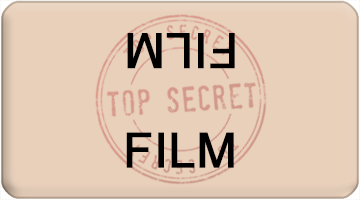
<style>
.page{position:relative;width:360px;height:200px;background:#e8d0bb}
.page>*{position:absolute;margin:0}
.t1{font:48px "ArialMT";color:#000000;font-weight:bold}
</style>
<div class="page">
<p class="t1" style="left:127px;top:33px;width:108px;height:36px;rotate:180deg">FILM</p>
<p class="t1" style="left:126px;top:132px;width:108px;height:36px">FILM</p>
</div>
